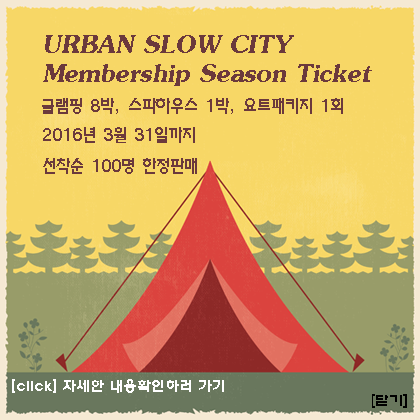
<style>
.page{position:relative;width:420px;height:420px;background:#f7d766}
.page>*{position:absolute;margin:0}
.t1{font:40px/10px "JasmineUPCBoldItalic";color:#6b393c}
.t2{font:18px "À¸¶äÃ¼";color:#6b393c}
.t3{font:14px "H2wulB";color:#ffffff}
.t4{font:14px "ExpoB-HM";color:#000000}
</style>
<div class="page">
<p class="t1" style="left:43px;top:35px;width:329px;height:51px">URBAN SLOW CITY<br>Membership Season Ticket</p>
<p class="t2" style="left:42px;top:98px;width:301px;height:16px">글램핑 8박, 스파하우스 1박, 요트패키지 1회</p>
<p class="t2" style="left:43px;top:127px;width:154px;height:47px">2016년 3월 31일까지<br>선착순 100명 한정판매</p>
<p class="t3" style="left:12px;top:379px;width:212px;height:14px">[click] 자세한 내용확인하러 가기</p>
<p class="t4" style="left:372px;top:394px;width:35px;height:14px">[닫기]</p>
</div>
